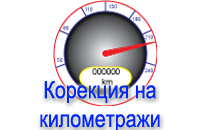
<style>
.page{position:relative;width:200px;height:130px;background:#ffffff}
.page>*{position:absolute;margin:0}
.t1{font:24px "ArialNarrow";color:#0326fd}
</style>
<div class="page">
<p class="t1" style="left:40px;top:80px;width:120px;height:52px;text-align:center">Корекция на         километражи</p>
</div>
